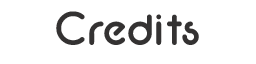
<style>
.page{position:relative;width:256px;height:64px;background:#ffffff}
.page>*{position:absolute;margin:0}
.t1{font:48px "Neon80s";color:#343232}
</style>
<div class="page">
<p class="t1" style="left:56px;top:11px;width:143px;height:34px">Credits</p>
</div>
